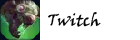
<style>
.page{position:relative;width:140px;height:40px;background:#ffffff}
.page>*{position:absolute;margin:0}
.t1{font:16px "VinerHandITC";color:#000000}
</style>
<div class="page">
<p class="t1" style="left:48px;top:12px;width:53px;height:15px">Twitch</p>
</div>
